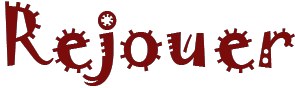
<style>
.page{position:relative;width:295px;height:88px;background:#ffffff}
.page>*{position:absolute;margin:0}
.t1{font:75px "Jokerman-Regular";color:#7b0c0c}
</style>
<div class="page">
<p class="t1" style="left:5px;top:1px;width:290px;height:85px">Rejouer</p>
<p class="t1" style="left:5px;top:1px;width:290px;height:85px">Rejouer</p>
</div>
